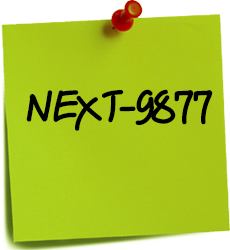
<style>
.page{position:relative;width:230px;height:250px}
.page>*{position:absolute;margin:0}
.t1{font:40px "Exposition";color:#000000}
</style>
<div class="page">
<p class="t1" style="left:26px;top:89px;width:187px;height:42px">NEXT-9877</p>
</div>
